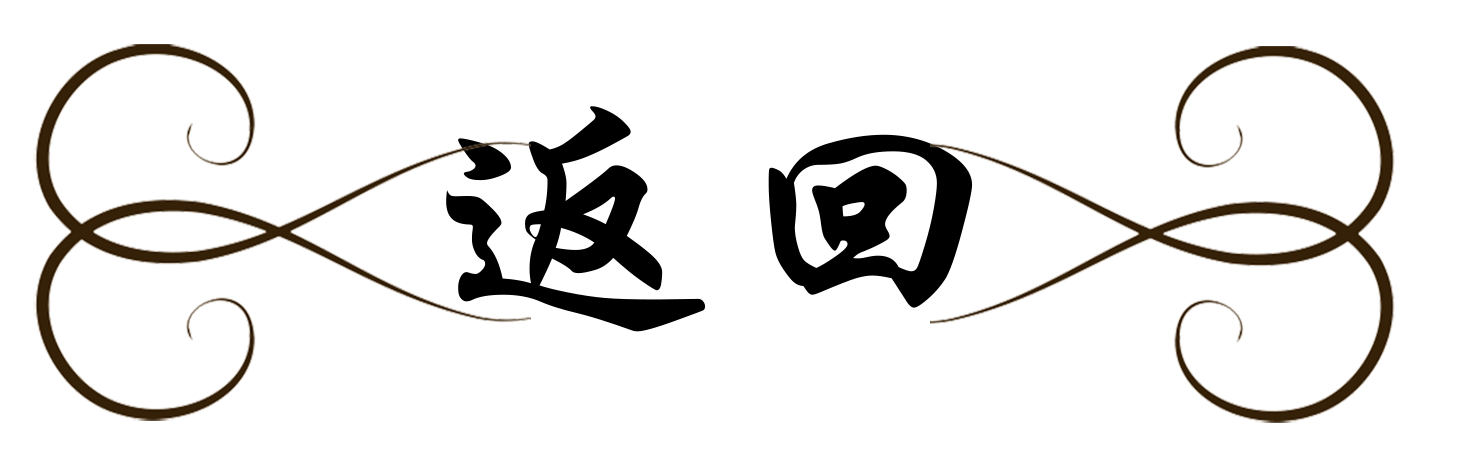
<style>
.page{position:relative;width:1467px;height:467px;background:#ffffff}
.page>*{position:absolute;margin:0}
.t1{font:300px "STXingkai";color:#000000}
</style>
<div class="page">
<p class="t1" style="left:446px;top:106px;width:527px;height:226px">返回</p>
</div>
